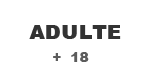
<style>
.page{position:relative;width:149px;height:82px;background:#ffffff}
.page>*{position:absolute;margin:0}
.t1{font:24px "Arial-Black";color:#333333;font-variant:small-caps}
.t2{font:14px "Arial-Black";color:#5c5c5c;font-variant:small-caps}
</style>
<div class="page">
<p class="t1" style="left:29px;top:25px;width:92px;height:14px">adulte</p>
<p class="t2" style="left:53px;top:52px;width:36px;height:10px">18</p>
</div>
